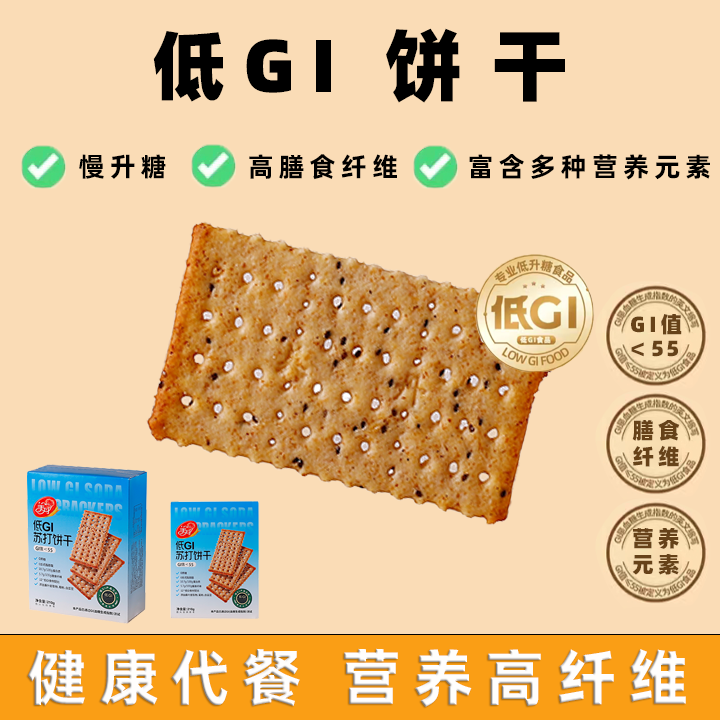
<style>
.page{position:relative;width:720px;height:720px;background:#fadcb6}
.page>*{position:absolute;margin:0}
.t1{font:78.5px "AlibabaPuHuiTi-Heavy";letter-spacing:0.36em;color:#000000}
.t2{font:75px "AlibabaPuHuiTi-Heavy";letter-spacing:0.22em;color:#000000}
.t3{font:26.7px "AlibabaPuHuiTi-Bold";letter-spacing:0.18em;color:#000000}
.t4{font:21.9px "AlibabaPuHuiTi-Heavy";letter-spacing:0.18em;color:#664219}
.t5{font:21.9px "AlibabaPuHuiTi-Heavy";letter-spacing:0.1em;color:#664219}
.t6{font:61.6px "AlibabaPuHuiTi-Bold";letter-spacing:0.18em;color:#ffffff}
</style>
<div class="page">
<p class="t1" style="left:386px;top:28px;width:179px;height:75px">饼干</p>
<p class="t2" style="left:153px;top:31px;width:178px;height:71px">低GI</p>
<p class="t3" style="left:79px;top:154px;width:87px;height:25px">慢升糖</p>
<p class="t3" style="left:249px;top:154px;width:148px;height:26px">高膳食纤维</p>
<p class="t3" style="left:469px;top:154px;width:241px;height:26px">富含多种营养元素</p>
<p class="t4" style="left:631px;top:314px;width:51px;height:21px">GI值</p>
<p class="t5" style="left:631px;top:340px;width:47px;height:17px">＜55</p>
<p class="t4" style="left:632px;top:420px;width:48px;height:47px;text-align:center">膳食<br>纤维</p>
<p class="t4" style="left:632px;top:528px;width:47px;height:47px;text-align:center">营养<br>元素</p>
<p class="t6" style="left:27px;top:648px;width:659px;height:59px">健康代餐 营养高纤维</p>
</div>
